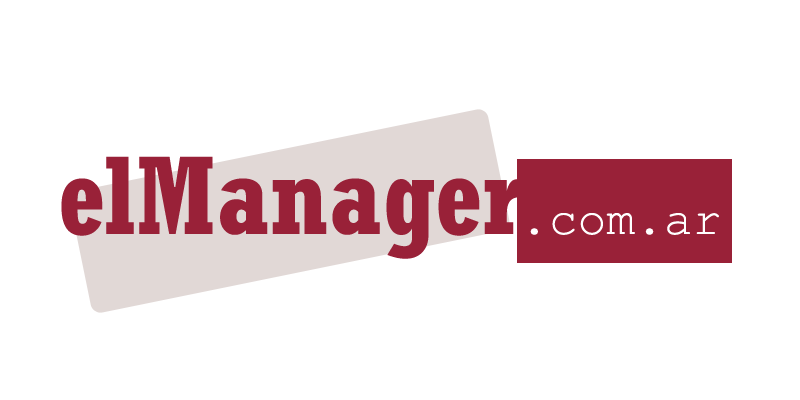
<style>
.page{position:relative;width:800px;height:400px;background:#ffffff}
.page>*{position:absolute;margin:0}
.t1{font:110px "Rockwell-CondensedBold";color:#992138}
.t2{font:48px "CourierNewPSMT";color:#ffffff}
</style>
<div class="page">
<p class="t1" style="left:61px;top:156px;width:658px;height:103px">elManager<span class="t2">.com.ar</span></p>
</div>
